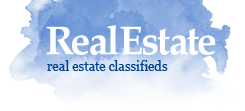
<style>
.page{position:relative;width:245px;height:111px;background:#ffffff}
.page>*{position:absolute;margin:0}
.t1{font:40.1px "PalatinoLinotype-Bold";letter-spacing:-0.01em;color:#ffffff}
.t2{font:13px "Georgia";color:#01428d}
</style>
<div class="page">
<p class="t1" style="left:46px;top:25px;width:170px;height:30px">RealEstate</p>
<p class="t2" style="left:47px;top:60px;width:121px;height:11px">real estate classifieds</p>
</div>
